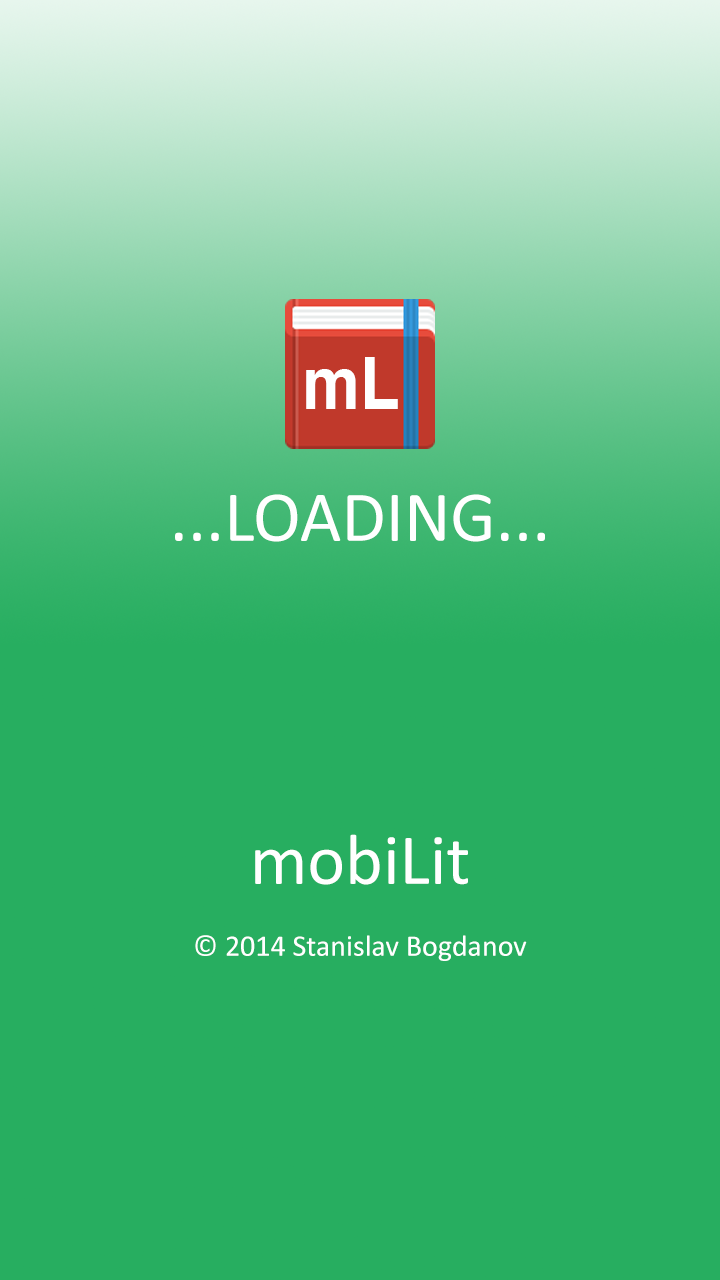
<style>
.page{position:relative;width:720px;height:1280px;background:#27ae60}
.page>*{position:absolute;margin:0}
.t1{font:72px "Calibri";color:#ffffff}
.t2{font:30px/72px "Calibri";color:#ffffff}
.t3{font:72px/72px "Calibri";color:#ffffff}
</style>
<div class="page">
<p class="t1" style="left:175px;top:494px;width:370px;height:48px">...LOADING...</p>
<p class="t2" style="left:195px;top:834px;width:332px;height:127px;text-align:justify"><span class="t3">mobiLit<br></span>© 2014 Stanislav Bogdanov</p>
</div>
